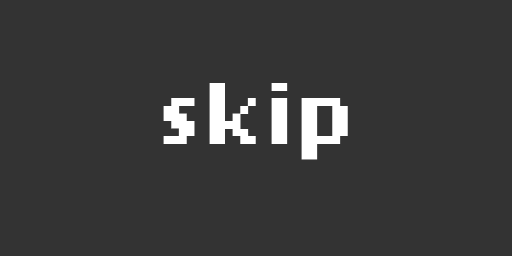
<style>
.page{position:relative;width:512px;height:256px;background:#333333}
.page>*{position:absolute;margin:0}
.t1{font:92px "LoRes12OT-Bold";color:#ffffff}
</style>
<div class="page">
<p class="t1" style="left:163px;top:83px;width:185px;height:77px">skip</p>
</div>
